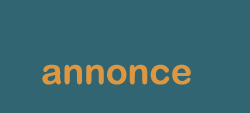
<style>
.page{position:relative;width:250px;height:113px;background:#316572}
.page>*{position:absolute;margin:0}
.t1{font:36px "ArialRoundedMTBold";color:#dd9741}
</style>
<div class="page">
<p class="t1" style="left:42px;top:64px;width:149px;height:21px">annonce</p>
</div>
